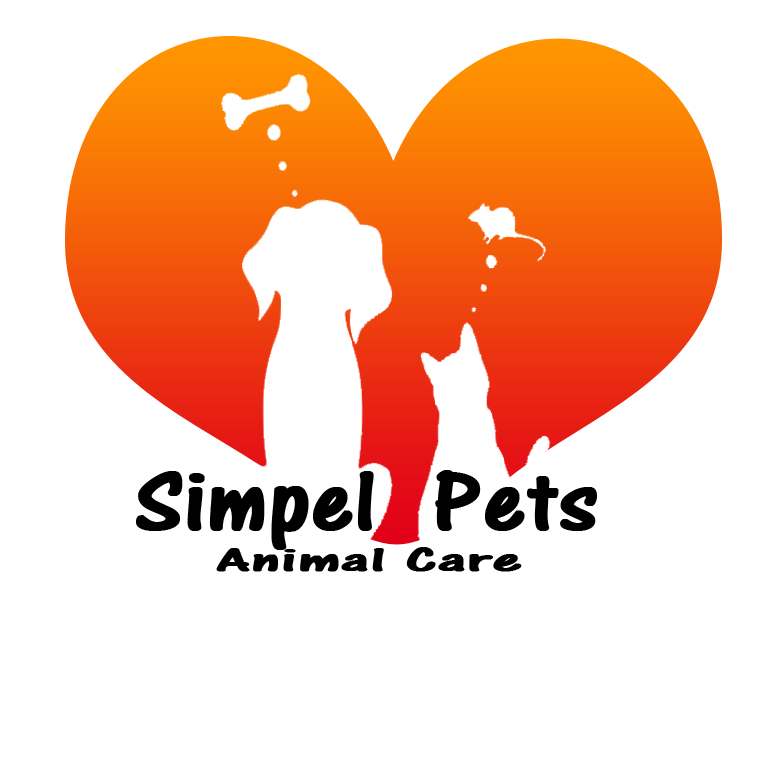
<style>
.page{position:relative;width:777px;height:777px;background:#ffffff}
.page>*{position:absolute;margin:0}
.t1{font:90px "ARCENA";color:#000000;font-weight:bold;scale:1.1 1}
.t2{font:35px "ARCENA";color:#000000;font-weight:bold;scale:2 1}
</style>
<div class="page">
<p class="t1" style="left:136px;top:470px;width:461px;height:80px">Simpel  Pets</p>
<p class="t2" style="left:216px;top:547px;width:306px;height:25px">Animal Care</p>
</div>
